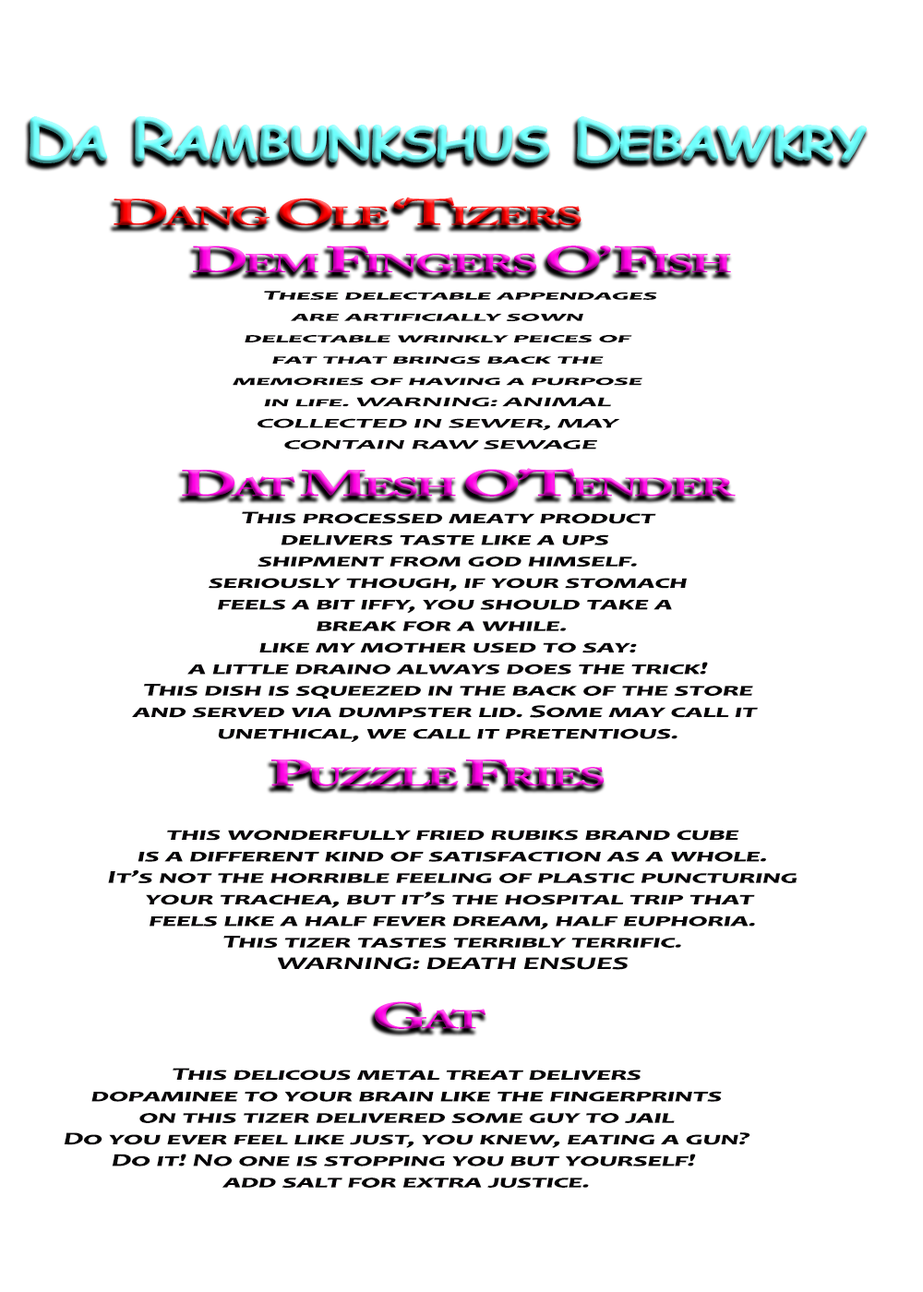
<style>
.page{position:relative;width:923px;height:1292px;background:#ffffff}
.page>*{position:absolute;margin:0}
.t1{font:57.7px "ComicSansMS-Bold";letter-spacing:-0.075em;font-variant:small-caps;scale:1.2 1}
.t2{font:36.5px "ACaslonPro-Bold";letter-spacing:-0.075em;font-variant:small-caps;scale:1.87 1}
.t3{font:13.3px "Candara-BoldItalic";letter-spacing:-0.025em;color:#070507;font-variant:small-caps;scale:2.48 1}
.t4{font:17.9px "Candara-BoldItalic";letter-spacing:-0.025em;color:#070507;font-variant:small-caps;scale:1.86 1}
</style>
<div class="page">
<p class="t1" style="left:30px;top:116px;width:838px;height:47px">Da Rambunkshus Debawkry</p>
<p class="t2" style="left:114px;top:197px;width:467px;height:29px">Dang Ole ‘Tizers</p>
<p class="t2" style="left:193px;top:245px;width:538px;height:28px">Dem Fingers O’ Fish</p>
<p class="t3" style="left:233px;top:291px;width:424px;height:158px;text-align:center">These delectable appendages<br>are artificially sown <br>delectable wrinkly peices of <br>fat that brings back the <br>memories of having a purpose <br>in life. WARNING: ANIMAL <br>COLLECTED IN SEWER, MAY <br>CONTAIN RAW SEWAGE</p>
<p class="t2" style="left:182px;top:468px;width:554px;height:29px">Dat Mesh O’Tender</p>
<p class="t4" style="left:132px;top:511px;width:626px;height:231px;text-align:center">This processed meaty product<br>delivers taste like a ups <br>shipment from god himself.<br>seriously though, if your stomach<br>feels a bit iffy, you should take a <br>break for a while.  <br>like my mother used to say:<br>a little draino always does the trick!<br>This dish is squeezed in the back of the store<br>and served via dumpster lid. Some may call it <br>unethical, we call it pretentious.</p>
<p class="t2" style="left:271px;top:759px;width:333px;height:27px">Puzzle Fries</p>
<p class="t4" style="left:108px;top:830px;width:689px;height:140px;text-align:center">this wonderfully fried rubiks brand cube<br>is a different kind of satisfaction as a whole.<br>It’s not the horrible feeling of plastic puncturing<br>your trachea, but it’s the hospital trip that <br>feels like a half fever dream, half euphoria.<br>This tizer tastes terribly terrific.<br>WARNING: DEATH ENSUES</p>
<p class="t2" style="left:375px;top:1001px;width:110px;height:28px">Gat</p>
<p class="t4" style="left:64px;top:1068px;width:686px;height:120px;text-align:center">This delicous metal treat delivers<br>dopaminee to your brain like the fingerprints<br>on this tizer delivered some guy to jail<br>Do you ever feel like just, you knew, eating a gun?<br>Do it! No one is stopping you but yourself! <br>add salt for extra justice.</p>
</div>
